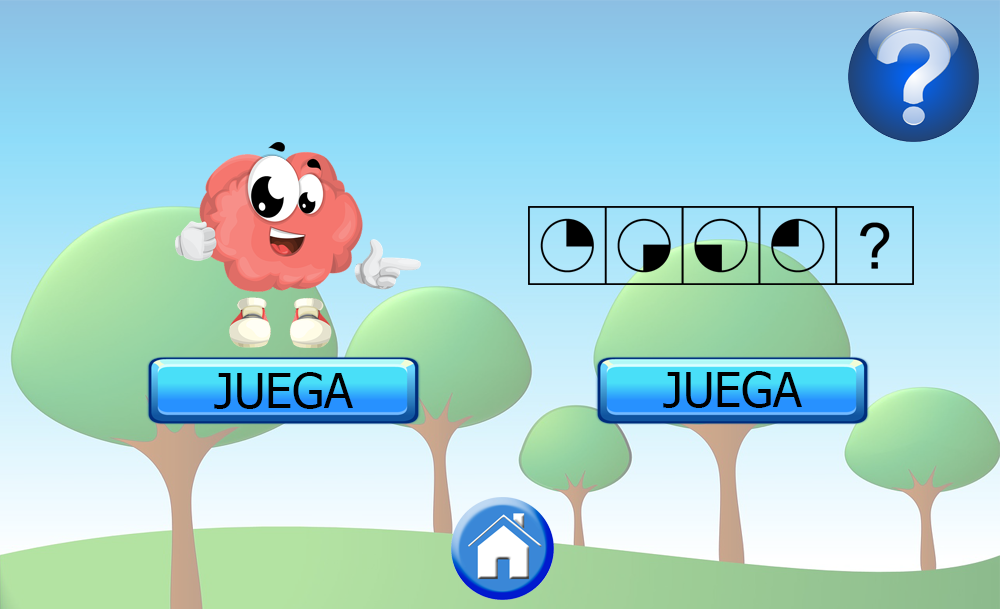
<style>
.page{position:relative;width:1000px;height:609px}
.page>*{position:absolute;margin:0}
.t1{font:48px "Tahoma";color:#000000}
</style>
<div class="page">
<p class="t1" style="left:214px;top:372px;width:139px;height:37px">JUEGA</p>
<p class="t1" style="left:663px;top:371px;width:139px;height:37px">JUEGA</p>
</div>
